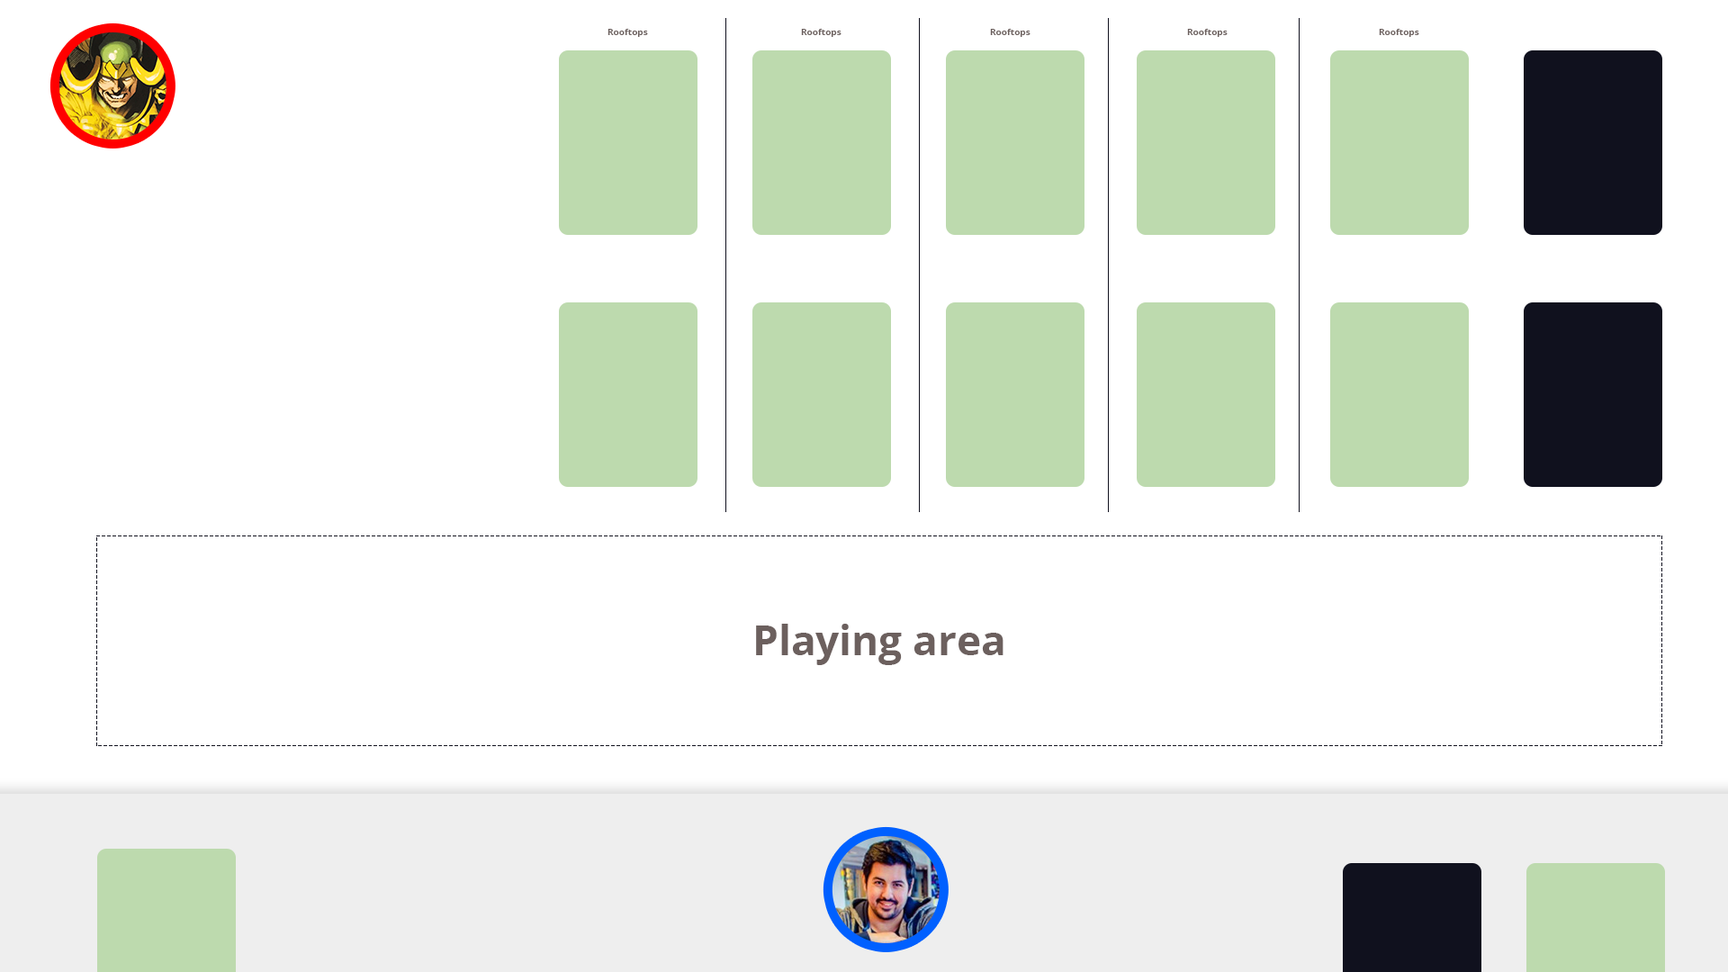
<style>
.page{position:relative;width:1728px;height:972px;background:#ffffff}
.page>*{position:absolute;margin:0}
.t1{font:9px "OpenSans-Bold";color:#6c605e}
.t2{font:41.2px "OpenSans-Bold";color:#6c605e}
</style>
<div class="page">
<p class="t1" style="left:608px;top:29px;width:40px;height:8px">Rooftops</p>
<p class="t1" style="left:801px;top:29px;width:41px;height:8px">Rooftops</p>
<p class="t1" style="left:990px;top:29px;width:40px;height:8px">Rooftops</p>
<p class="t1" style="left:1187px;top:29px;width:41px;height:8px">Rooftops</p>
<p class="t1" style="left:1379px;top:29px;width:40px;height:8px">Rooftops</p>
<p class="t2" style="left:756px;top:624px;width:248px;height:41px">Playing area</p>
</div>
